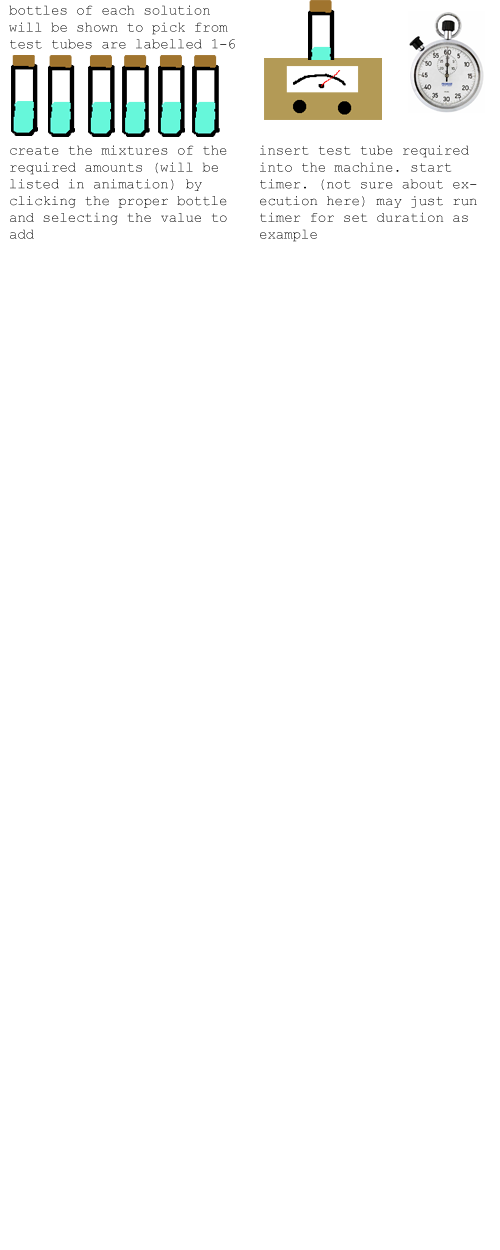
<style>
.page{position:relative;width:500px;height:1250px;background:#ffffff}
.page>*{position:absolute;margin:0}
.t1{font:14px "CourierNewPSMT"}
.t2{font:14px "CourierNewPSMT";color:#000000}
</style>
<div class="page">
<p class="t1" style="left:9px;top:5px;width:226px;height:44px">bottles of each solution will be shown to pick from test tubes are labelled 1-6</p>
<p class="t1" style="left:10px;top:145px;width:217px;height:94px">create the mixtures of the required amounts (will be listed in animation) by clicking the proper bottle and selecting the value to add</p>
<p class="t2" style="left:260px;top:145px;width:217px;height:97px">insert test tube required into the machine. start timer. (not sure about execution here) may just run timer for set duration as example</p>
</div>
